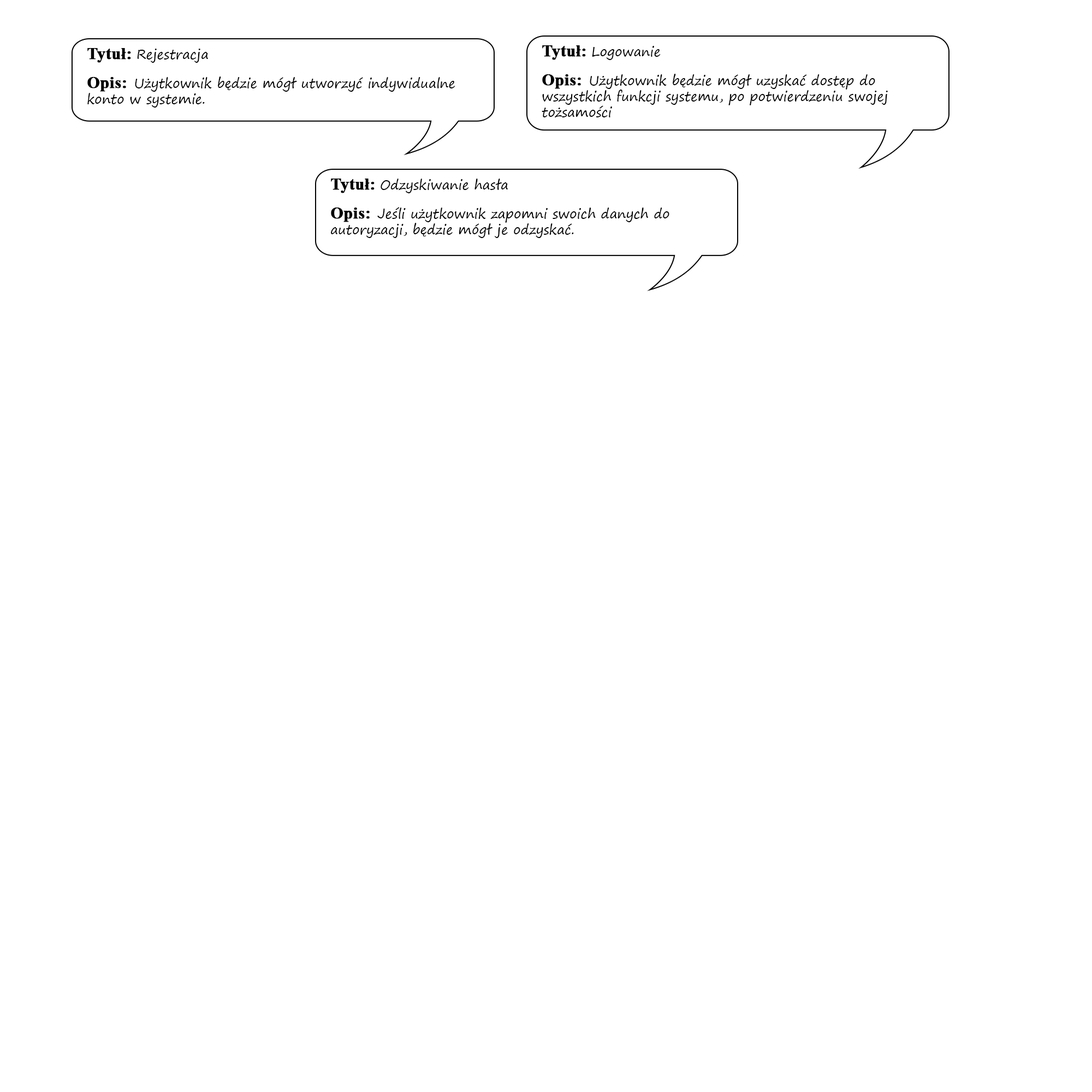
<style>
.page{position:relative;width:1092px;height:1092px;background:#ffffff}
.page>*{position:absolute;margin:0}
.t1{font:13.1px "SegoePrint";color:#000000}
.t2{font:16.4px "TimesNewRomanPS-BoldMT";color:#000000;font-weight:bold}
</style>
<div class="page">
<p class="t1" style="left:87px;top:48px;width:368px;height:60px"><span class="t2">Tytuł: </span>Rejestracja<br><br><span class="t2">Opis:  </span>Użytkownik będzie mógł utworzyć indywidualne konto w systemie.</p>
<p class="t1" style="left:542px;top:45px;width:346px;height:72px"><span class="t2">Tytuł: </span>Logowanie<br><br><span class="t2">Opis:  </span>Użytkownik będzie mógł uzyskać dostęp do wszystkich funkcji systemu, po potwierdzeniu swojej tożsamości</p>
<p class="t1" style="left:331px;top:179px;width:338px;height:59px"><span class="t2">Tytuł: </span>Odzyskiwanie hasła<br><br><span class="t2">Opis:  </span>Jeśli użytkownik zapomni swoich danych do autoryzacji, będzie mógł je odzyskać.</p>
</div>
